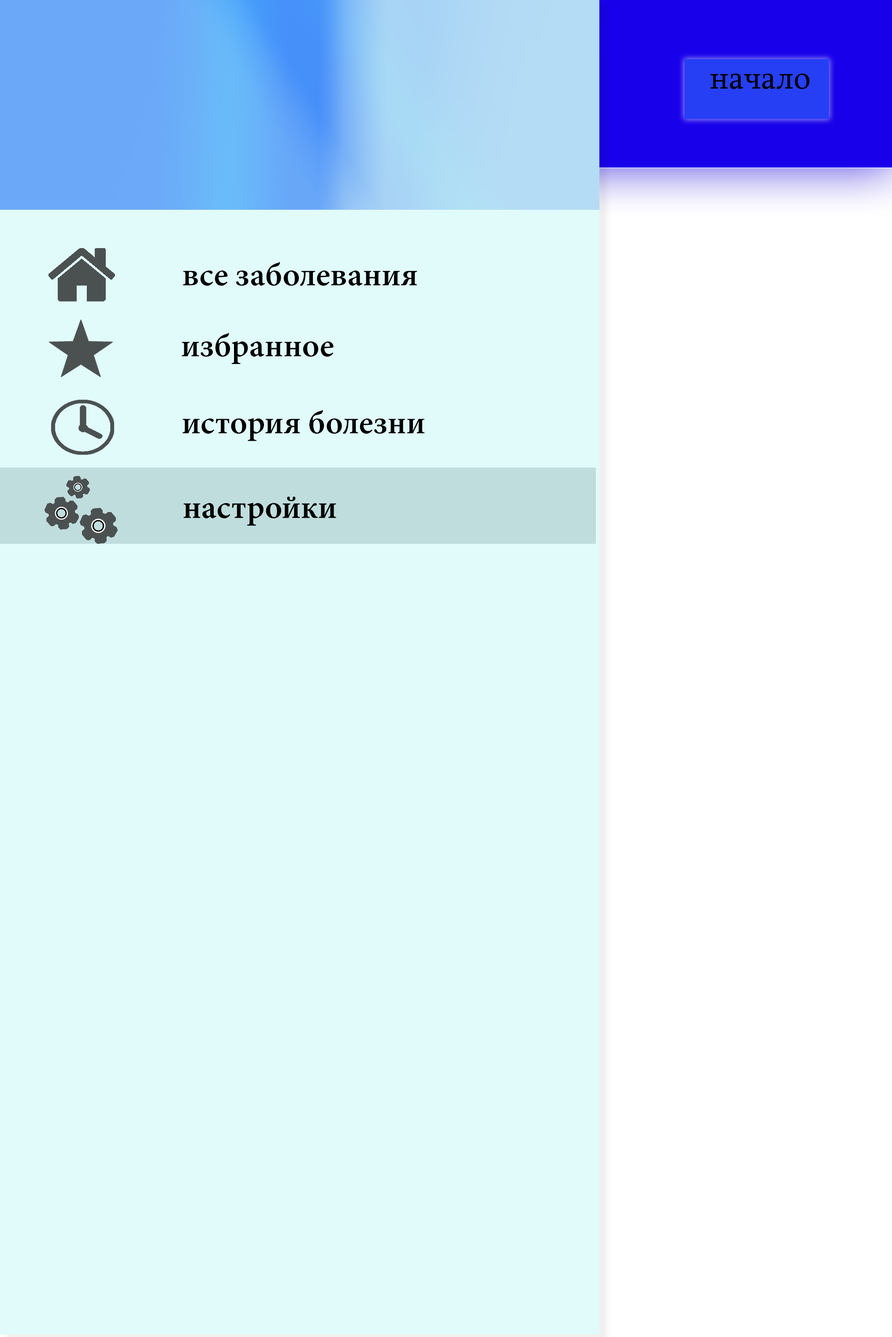
<style>
.page{position:relative;width:892px;height:1337px;background:#e1fafa}
.page>*{position:absolute;margin:0}
.t1{font:33px "Sylfaen";color:#000000}
.t2{font:33px "MinionPro-Semibold";color:#000000}
</style>
<div class="page">
<p class="t1" style="left:710px;top:74px;width:99px;height:15px">начало</p>
<p class="t2" style="left:183px;top:262px;width:234px;height:24px">все заболевания</p>
<p class="t2" style="left:182px;top:333px;width:152px;height:31px">избранное</p>
<p class="t2" style="left:182px;top:410px;width:242px;height:31px">история болезни</p>
</div>
